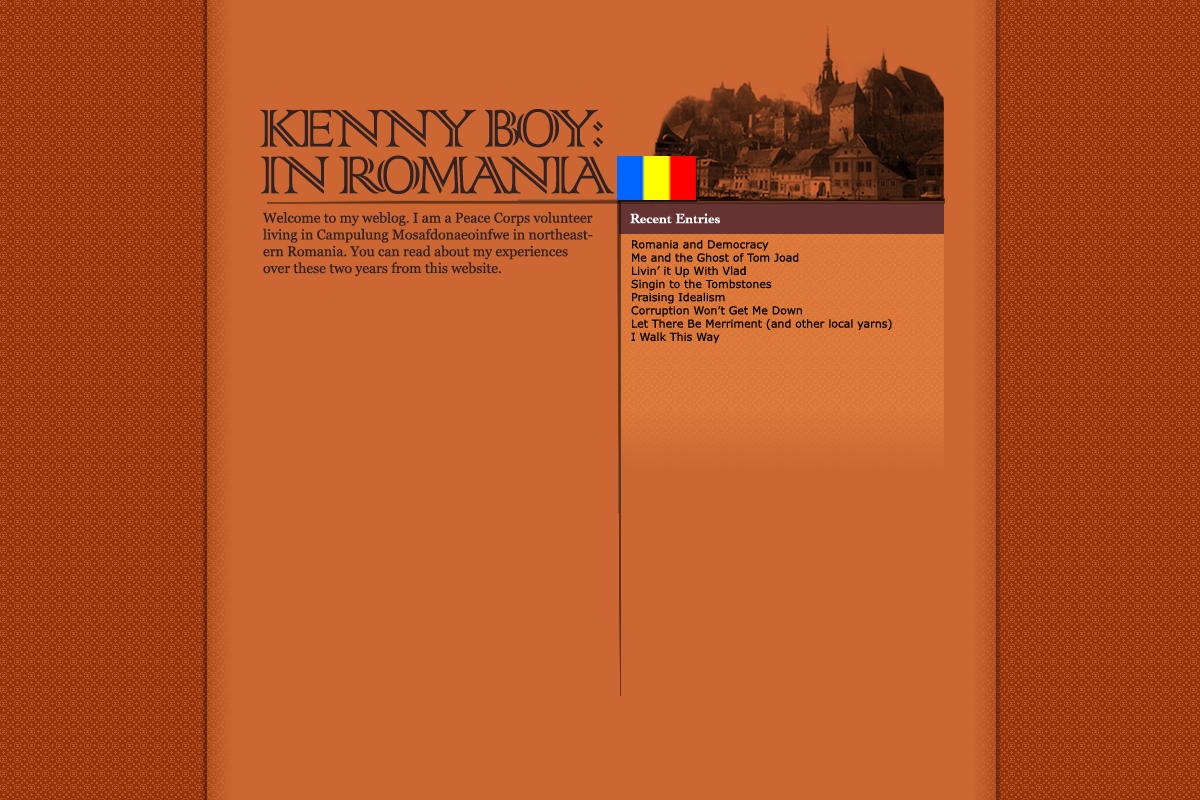
<style>
.page{position:relative;width:1200px;height:800px;background:#cc6633}
.page>*{position:absolute;margin:0}
.t1{font:70px/46.7px "ColonnaMT";letter-spacing:-0.075em;color:#332222}
.t2{font:14px "Georgia";color:#332222}
.t3{font:14px "Cochin-Bold";color:#ffffff}
.t4{font:11px "Verdana";color:#000000}
</style>
<div class="page">
<p class="t1" style="left:260px;top:109px;width:354px;height:85px">KENNY BOY:<br>IN ROMANIA</p>
<p class="t2" style="left:262px;top:212px;width:331px;height:65px">Welcome to my weblog. I am a Peace Corps volunteer living in Campulung Mosafdonaeoinfwe in northeastern Romania. You can read about my experiences over these two years from this website.</p>
<p class="t3" style="left:630px;top:213px;width:90px;height:11px">Recent Entries</p>
<p class="t4" style="left:631px;top:240px;width:261px;height:104px">Romania and Democracy<br>Me and the Ghost of Tom Joad<br>Livin’ it Up With Vlad<br>Singin to the Tombstones<br>Praising Idealism<br>Corruption Won’t Get Me Down<br>Let There Be Merriment (and other local yarns)<br>I Walk This Way</p>
</div>
